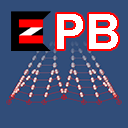
<style>
.page{position:relative;width:128px;height:128px;background:#314d79}
.page>*{position:absolute;margin:0}
.t1{font:48px "Arial-BoldMT";color:#ffffff}
</style>
<div class="page">
<p class="t1" style="left:57px;top:14px;width:61px;height:35px">PB</p>
</div>
